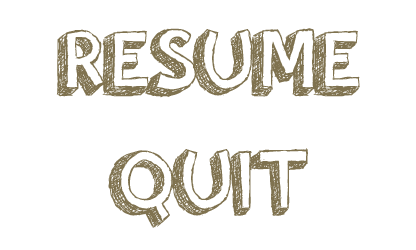
<style>
.page{position:relative;width:416px;height:250px;background:#ffffff}
.page>*{position:absolute;margin:0}
.t1{font:92px "orangejuice";color:#7f724f}
</style>
<div class="page">
<p class="t1" style="left:56px;top:28px;width:304px;height:70px">RESUME</p>
<p class="t1" style="left:108px;top:148px;width:200px;height:80px">QUIT</p>
</div>
